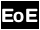
<style>
.page{position:relative;width:40px;height:30px;background:#000000}
.page>*{position:absolute;margin:0}
.t1{font:19px "Days";color:#ffffff;scale:0.9 1}
</style>
<div class="page">
<p class="t1" style="left:2px;top:8px;width:36px;height:15px">EoE</p>
</div>
